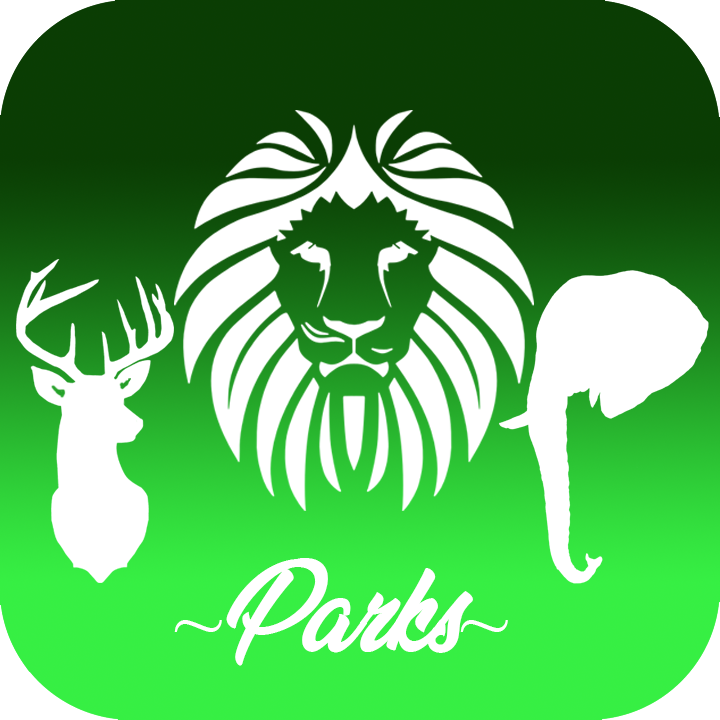
<style>
.page{position:relative;width:720px;height:720px;background:#ffffff}
.page>*{position:absolute;margin:0}
.t1{font:90px "VeganStylePersonalUse";color:#ffffff}
.t2{font:90px "TimesNewRomanPSMT";color:#ffffff}
</style>
<div class="page">
<p class="t1" style="left:174px;top:558px;width:334px;height:108px"><span class="t2">~</span>Parks<span class="t2">~</span></p>
</div>
